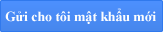
<style>
.page{position:relative;width:163px;height:32px}
.page>*{position:absolute;margin:0}
.t1{font:14px "TimesNewRomanPS-BoldMT";color:#fcfdfe}
</style>
<div class="page">
<p class="t1" style="left:5px;top:8px;width:151px;height:16px">Gửi cho tôi mật khẩu mới</p>
</div>
